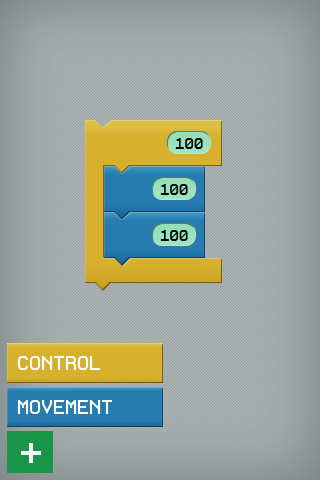
<style>
.page{position:relative;width:320px;height:480px}
.page>*{position:absolute;margin:0}
.t1{font:14px "ProFontWindows";color:#000000}
.t2{font:18px "ProFontWindows";color:#ffffff}
.t3{font:36px "ProFontWindows";color:#ffffff}
</style>
<div class="page">
<p class="t1" style="left:175px;top:138px;width:28px;height:11px">100</p>
<p class="t1" style="left:160px;top:184px;width:28px;height:11px">100</p>
<p class="t1" style="left:160px;top:230px;width:28px;height:11px">100</p>
<p class="t2" style="left:17px;top:356px;width:84px;height:14px">CONTROL</p>
<p class="t2" style="left:17px;top:400px;width:96px;height:14px">MOVEMENT</p>
<p class="t3" style="left:21px;top:443px;width:20px;height:20px">+</p>
</div>
